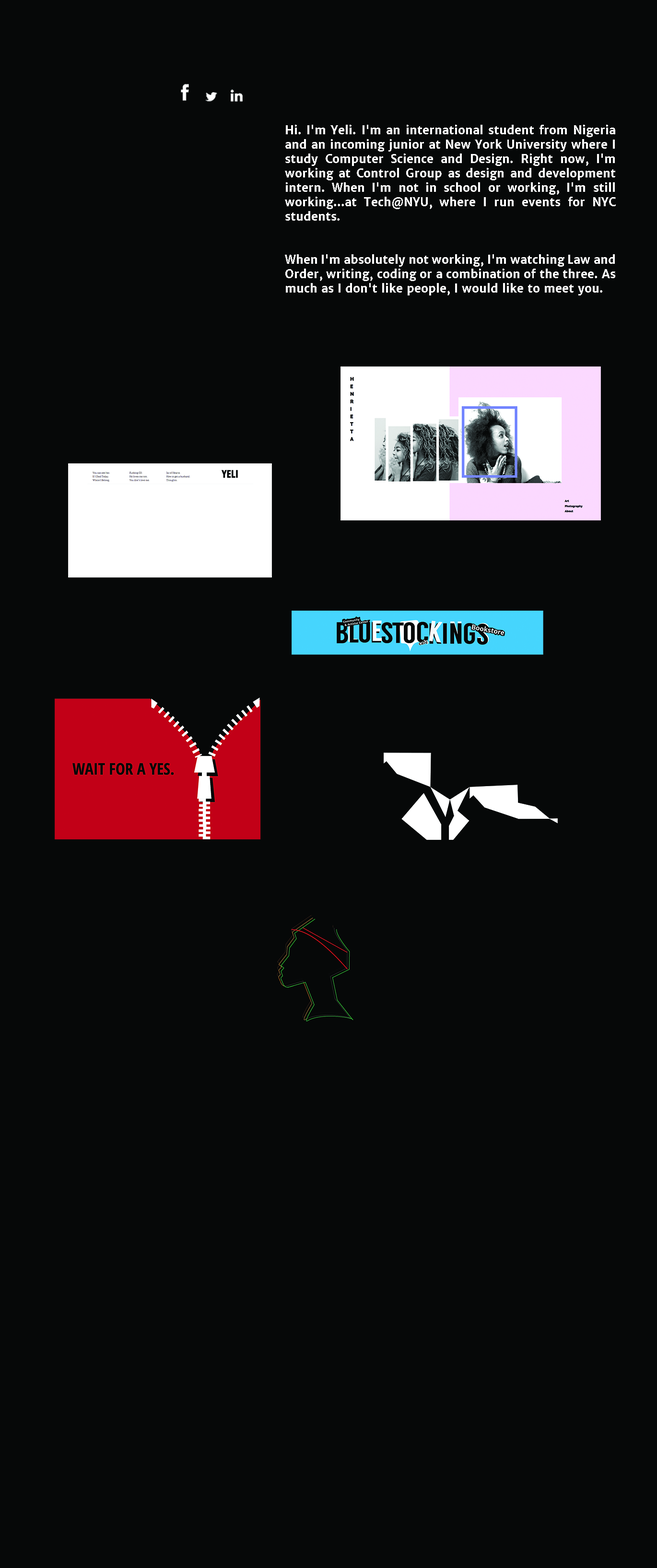
<style>
.page{position:relative;width:657px;height:1568px;background:#060808}
.page>*{position:absolute;margin:0}
.t1{font:11.5px/14.4px "MerriweatherSans-Bold";color:#ffffff}
.t2{font:11.5px/11.5px "MerriweatherSans-Bold";color:#000000}
</style>
<div class="page">
<p class="t1" style="left:285px;top:125px;width:331px;height:170px;text-align:justify">Hi. I'm Yeli. I'm an international student from Nigeria and an incoming junior at New York University where I study Computer Science and Design. Right now, I'm working at Control Group as design and development intern. When I'm not in school or working, I'm still working...at Tech@NYU, where I run events for NYC students.<br><br><br>When I'm absolutely not working, I'm watching Law and Order, writing, coding or a combination of the three. As much as I don't like people, I would like to meet you.<span class="t2">.</span></p>
</div>
